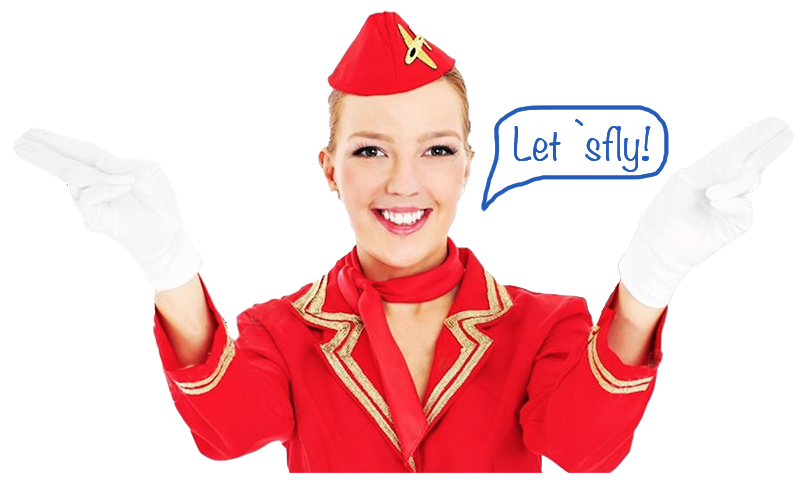
<style>
.page{position:relative;width:800px;height:484px;background:#ffffff}
.page>*{position:absolute;margin:0}
.t1{font:40px "Noteworthy-Light";letter-spacing:0.018em;color:#255cb7}
</style>
<div class="page">
<p class="t1" style="left:514px;top:119px;width:137px;height:53px">Let `sfly!</p>
</div>
